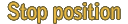
<style>
.page{position:relative;width:128px;height:24px;background:#ffffff}
.page>*{position:absolute;margin:0}
.t1{font:22px "BellGothicStd-Bold";letter-spacing:-0.025em;color:#e5b743}
</style>
<div class="page">
<p class="t1" style="left:8px;top:2px;width:112px;height:21px">Stop position</p>
</div>
